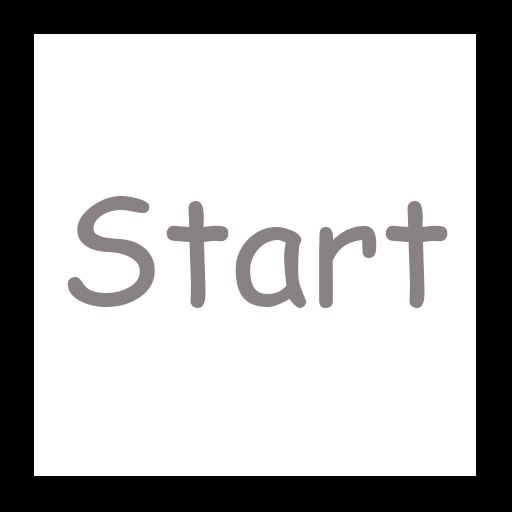
<style>
.page{position:relative;width:512px;height:512px;background:#ffffff}
.page>*{position:absolute;margin:0}
.t1{font:150px "ComicSansMS";color:#898282}
</style>
<div class="page">
<p class="t1" style="left:67px;top:196px;width:381px;height:112px">Start</p>
</div>
